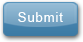
<style>
.page{position:relative;width:83px;height:42px}
.page>*{position:absolute;margin:0}
.t1{font:13.4px "ArialMT";letter-spacing:0.05em;color:#ffffff}
</style>
<div class="page">
<p class="t1" style="left:18px;top:12px;width:45px;height:10px">Submit</p>
</div>
